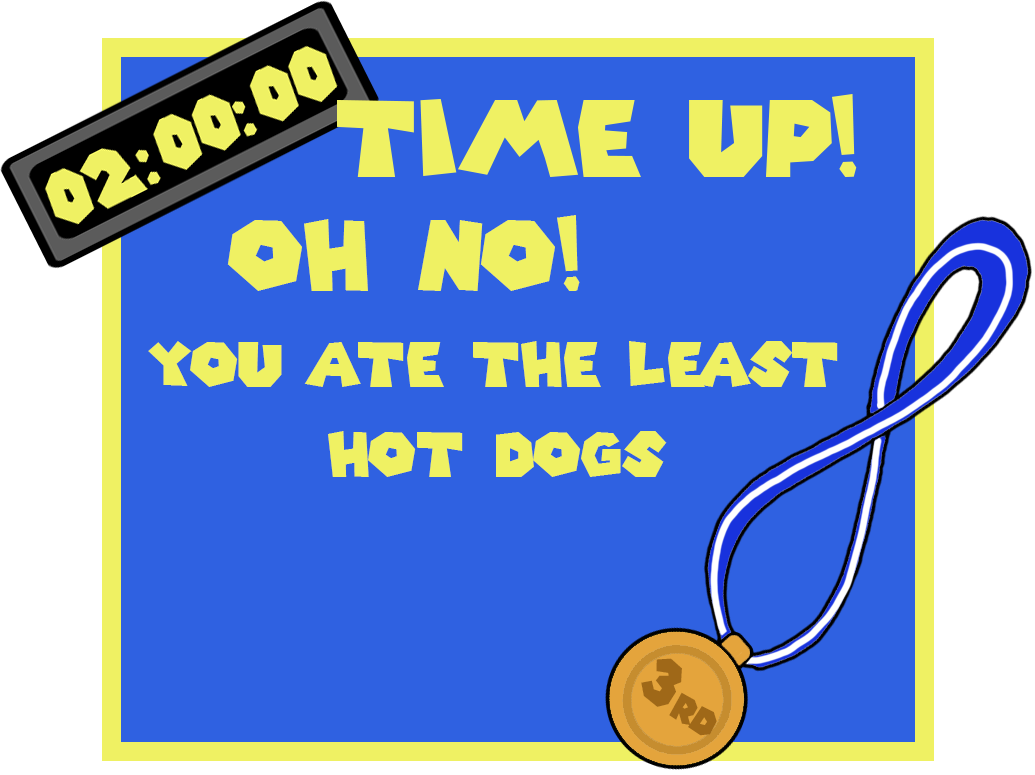
<style>
.page{position:relative;width:1035px;height:775px;background:#2f61e1}
.page>*{position:absolute;margin:0}
.t1{font:95.9px "SuperMarioGalaxy";color:#eff163}
.t2{font:61.4px/90.1px "SuperMarioGalaxy";color:#eff163}
.t3{font:36.1px "SuperMarioGalaxy";color:#9f6818}
.t4{font:64.4px "SuperMarioGalaxy";color:#9f6818}
</style>
<div class="page">
<p class="t1" style="left:227px;top:215px;width:353px;height:76px">oh no!</p>
<p class="t2" style="left:148px;top:341px;width:690px;height:136px;text-align:center">you ate the least<br>hot dogs</p>
<p class="t3" style="left:641px;top:658px;width:76px;height:78px;rotate:34deg"><span class="t4">3</span>rd</p>
</div>
